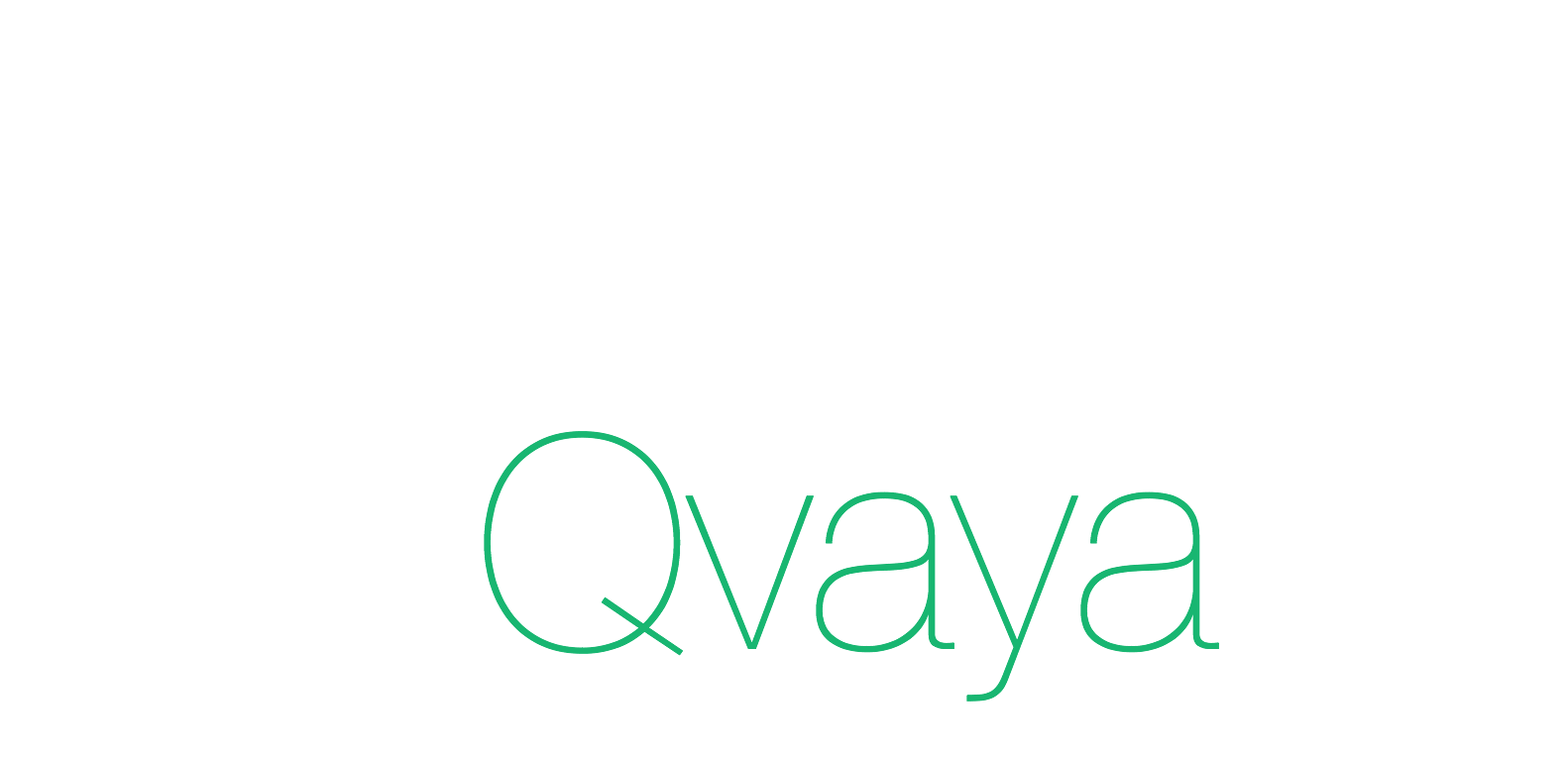
<style>
.page{position:relative;width:1568px;height:757px;background:#ffffff}
.page>*{position:absolute;margin:0}
.t1{font:297.3px "HelveticaNeue-UltraLight";color:#18b671}
</style>
<div class="page">
<p class="t1" style="left:484px;top:431px;width:735px;height:271px">Qvaya</p>
</div>
